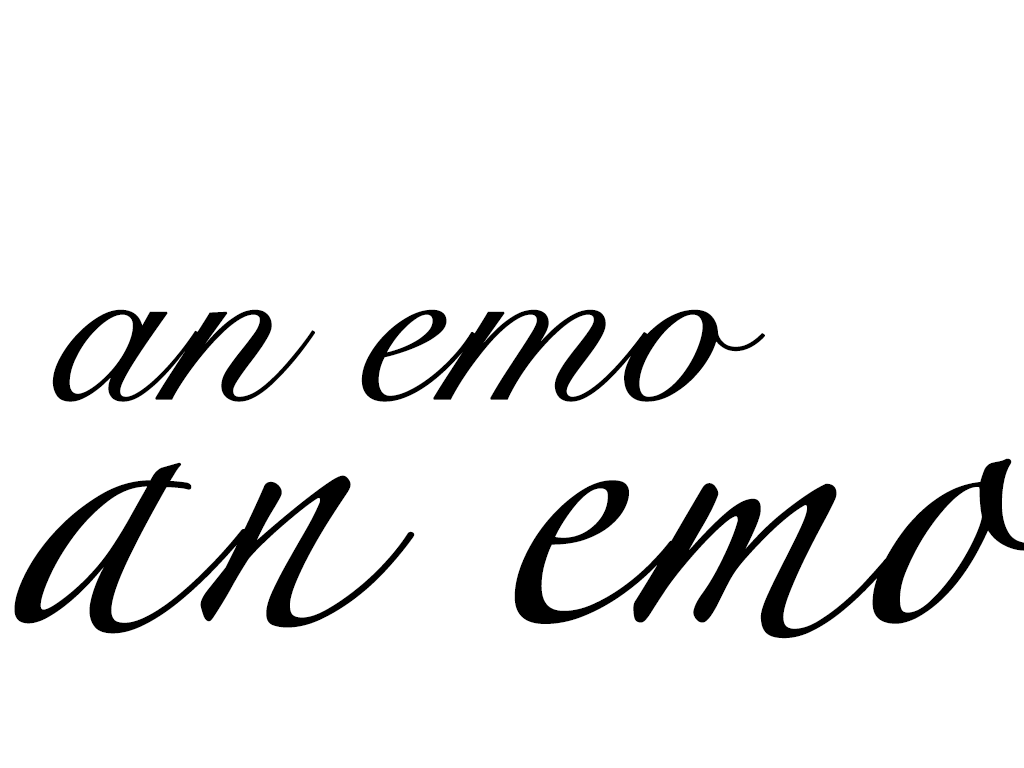
<style>
.page{position:relative;width:1024px;height:768px;background:#ffffff}
.page>*{position:absolute;margin:0}
.t1{font:250px "SnellRoundhand";color:#000000;font-weight:bold}
</style>
<div class="page">
<p class="t1" style="left:52px;top:309px;width:713px;height:93px">an emo</p>
</div>
